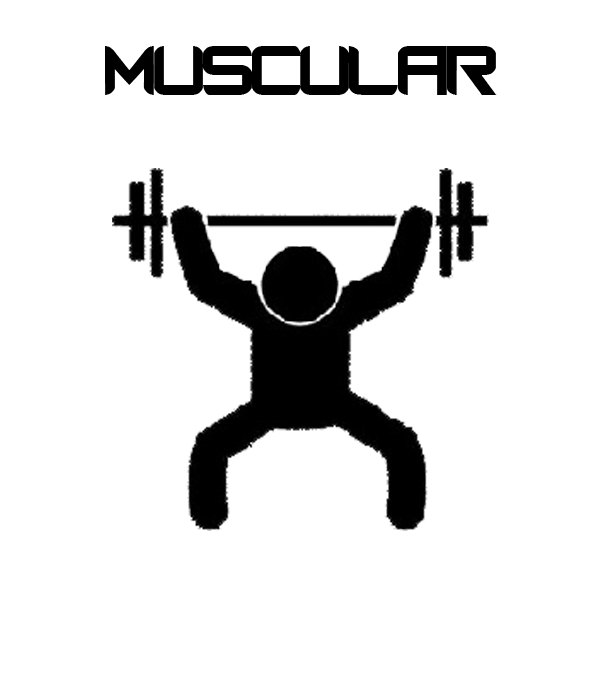
<style>
.page{position:relative;width:600px;height:700px;background:#ffffff}
.page>*{position:absolute;margin:0}
.t1{font:61px "Amazing-Spider-Man";color:#000000}
</style>
<div class="page">
<p class="t1" style="left:105px;top:46px;width:392px;height:49px">muscular</p>
</div>
